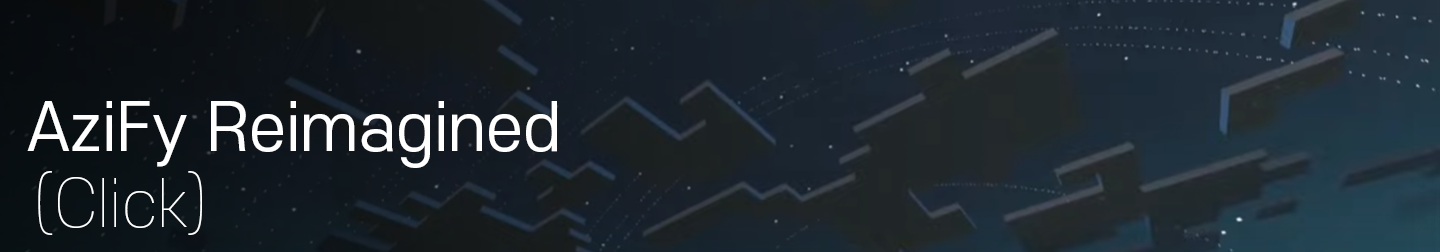
<style>
.page{position:relative;width:1440px;height:252px}
.page>*{position:absolute;margin:0}
.t1{font:64px "S-CoreDream-4Regular";color:#ffffff}
.t2{font:64px "S-CoreDream-1Thin";color:#ffffff}
</style>
<div class="page">
<p class="t1" style="left:27px;top:101px;width:530px;height:67px">AziFy Reimagined</p>
<p class="t2" style="left:38px;top:171px;width:164px;height:64px">(Click)</p>
</div>
